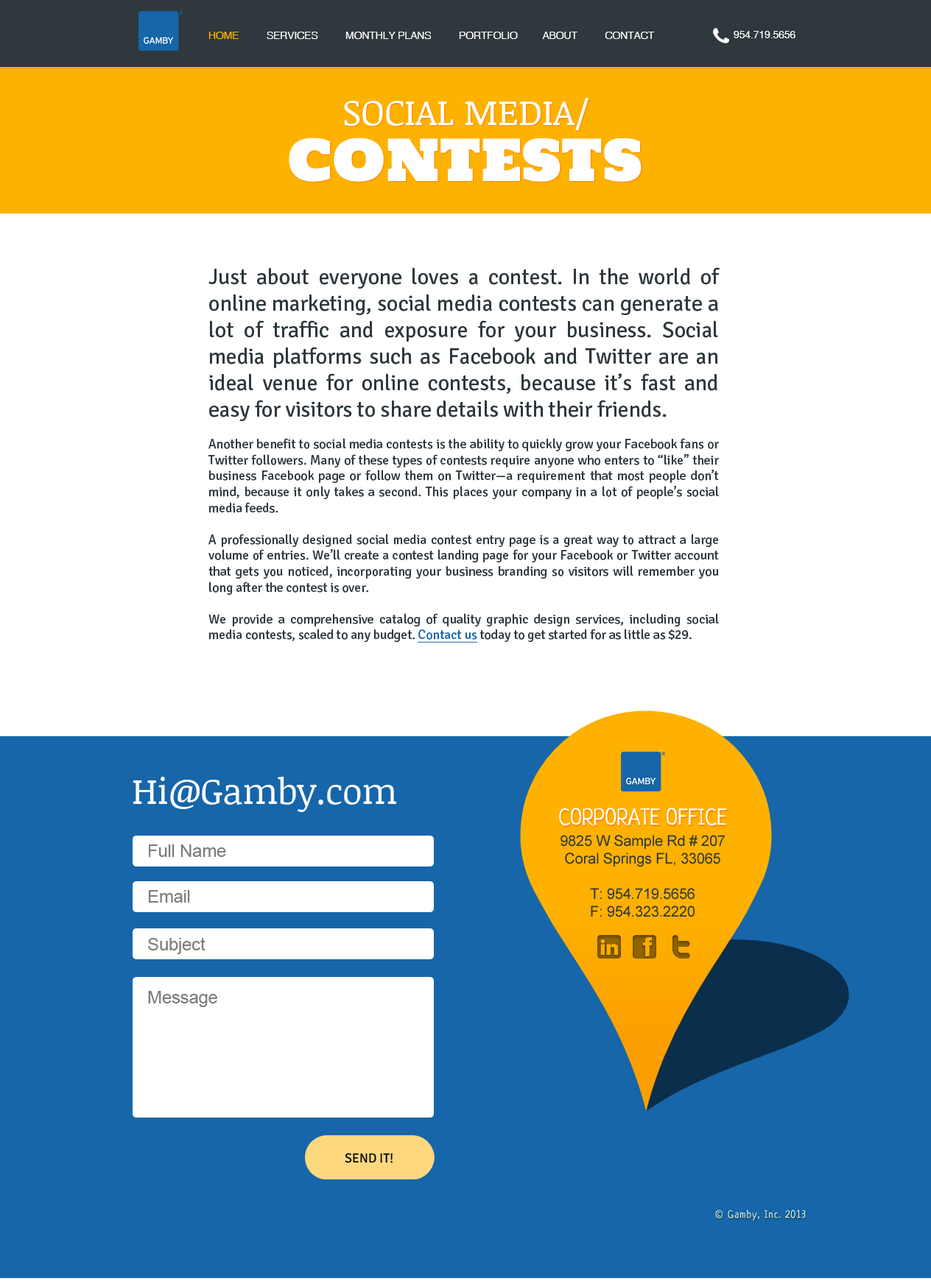
<style>
.page{position:relative;width:931px;height:1281px;background:#ffffff}
.page>*{position:absolute;margin:0}
.t1{font:10.3px "Helvetica";letter-spacing:-0.01em;color:#ffffff;text-transform:uppercase}
.t2{font:10.3px "Helvetica";letter-spacing:-0.01em;color:#feb200;text-transform:uppercase}
.t3{font:36.2px "NoticiaText-Regular";letter-spacing:-0.01em;color:#ffffff;text-transform:uppercase}
.t4{font:56.7px "HoltwoodOneSC";letter-spacing:-0.01em;color:#ffffff;text-transform:uppercase}
.t5{font:13.3px "Signika-Regular";letter-spacing:-0.01em;color:#2e383d}
.t6{font:22.1px "Signika-Regular";letter-spacing:-0.01em;color:#2e383d}
.t7{font:13.3px "Signika-Regular";letter-spacing:-0.01em;color:#1666a9;text-decoration:underline}
</style>
<div class="page">
<p class="t1" style="left:208px;top:32px;width:447px;height:7px"><span class="t2">home          </span>services          MONTHLY PLANS          portfolio         about          contact</p>
<p class="t1" style="left:733px;top:31px;width:62px;height:7px">954.719.5656</p>
<p class="t3" style="left:344px;top:98px;width:244px;height:32px">social media/</p>
<p class="t4" style="left:289px;top:138px;width:352px;height:44px">Contests</p>
<p class="t5" style="left:208px;top:267px;width:511px;height:376px;text-align:justify"><span class="t6">Just about everyone loves a contest. In the world of online marketing, social media contests can generate a lot of traffic and exposure for your business. Social media platforms such as Facebook and Twitter are an ideal venue for online contests, because it’s fast and easy for visitors to share details with their friends.<br></span><br>Another benefit to social media contests is the ability to quickly grow your Facebook fans or Twitter followers. Many of these types of contests require anyone who enters to “like” their business Facebook page or follow them on Twitter—a requirement that most people don’t mind, because it only takes a second. This places your company in a lot of people’s social media feeds.<br><br>A professionally designed social media contest entry page is a great way to attract a large volume of entries. We’ll create a contest landing page for your Facebook or Twitter account that gets you noticed, incorporating your business branding so visitors will remember you long after the contest is over.<br><br>We provide a comprehensive catalog of quality graphic design services, including social media contests, scaled to any budget. <span class="t7">Contact us</span> today to get started for as little as $29.</p>
</div>
